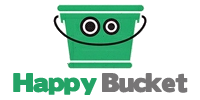
<style>
.page{position:relative;width:200px;height:100px;background:#ffffff}
.page>*{position:absolute;margin:0}
.t1{font:24px "BorisBlackBloxx";letter-spacing:-0.035em;color:#777576}
.t2{font:24px "BorisBlackBloxx";letter-spacing:-0.035em;color:#23a366}
</style>
<div class="page">
<p class="t1" style="left:13px;top:73px;width:175px;height:22px"><span class="t2">Happy </span>Bucket</p>
</div>
